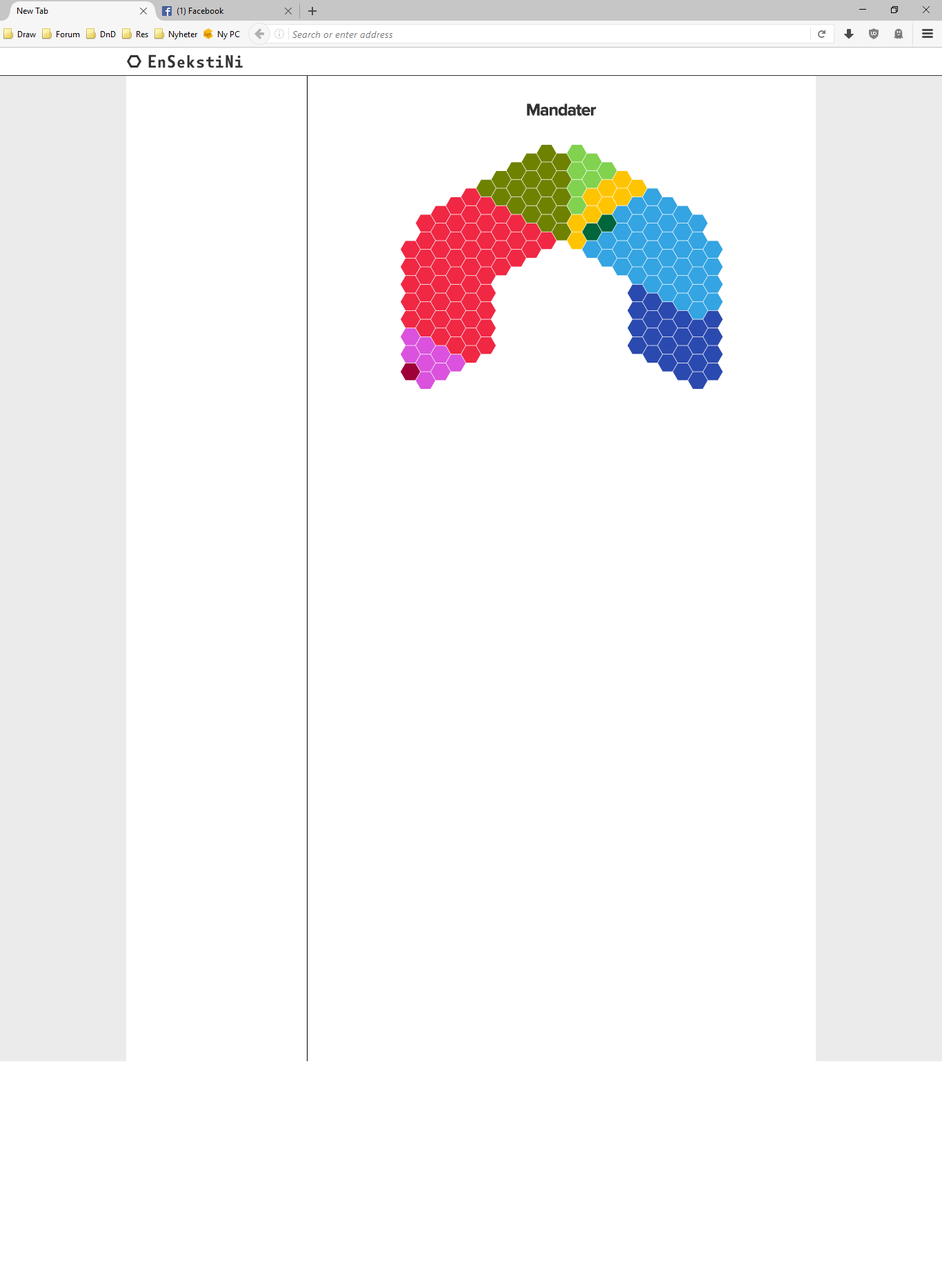
<style>
.page{position:relative;width:942px;height:1266px;background:#ffffff}
.page>*{position:absolute;margin:0}
.t1{font:17.2px "BotanikaMonoSemiBold";letter-spacing:-0.04em;color:#333333}
.t2{font:17.2px "ProximaNova-Bold";letter-spacing:-0.04em;color:#333333}
</style>
<div class="page">
<p class="t1" style="left:148px;top:54px;width:95px;height:14px">EnSekstiNi</p>
<p class="t2" style="left:527px;top:103px;width:69px;height:13px">Mandater</p>
</div>
